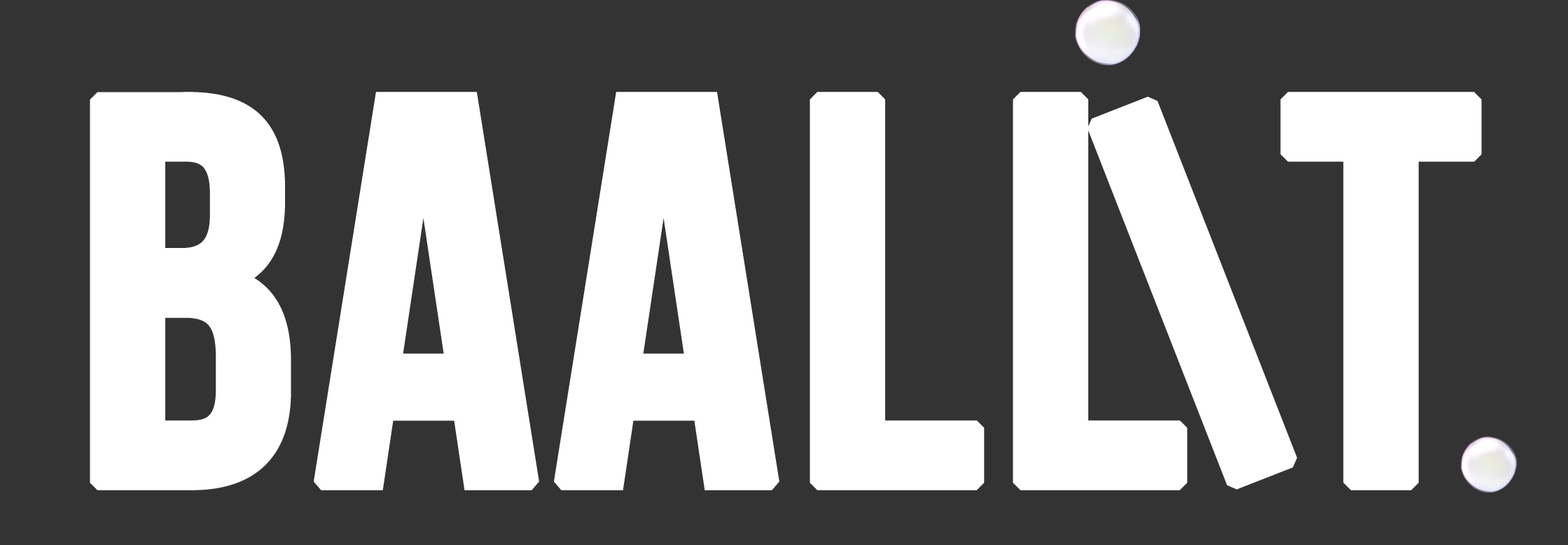
<style>
.page{position:relative;width:1568px;height:545px;background:#333333}
.page>*{position:absolute;margin:0}
.t1{font:547.1px "BebasNeueBold";letter-spacing:0.005em;color:#ffffff;font-weight:bold}
</style>
<div class="page">
<p class="t1" style="left:90px;top:92px;width:1098px;height:398px">BaalL</p>
<p class="t1" style="left:1088px;top:97px;width:209px;height:393px;rotate:-21deg">I</p>
<p class="t1" style="left:1280px;top:92px;width:202px;height:398px">T</p>
</div>
